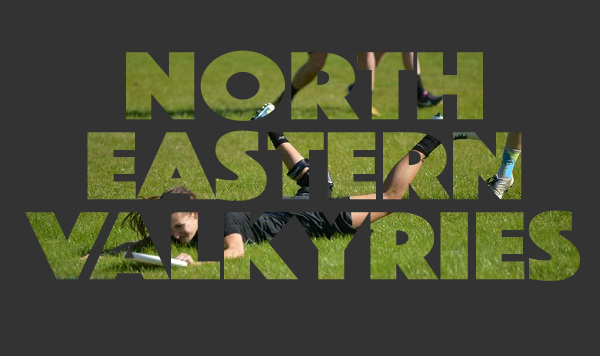
<style>
.page{position:relative;width:600px;height:356px;background:#333333}
.page>*{position:absolute;margin:0}
.t1{font:100px/80px "Phosphate-Solid";scale:1.2 1}
</style>
<div class="page">
<p class="t1" style="left:25px;top:50px;width:555px;height:231px;text-align:center">North<br>Eastern<br>Valkyries</p>
</div>
